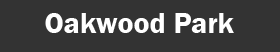
<style>
.page{position:relative;width:280px;height:52px;background:#333333}
.page>*{position:absolute;margin:0}
.t1{font:30px "FranklinGothic-Demi";color:#ffffff}
</style>
<div class="page">
<p class="t1" style="left:45px;top:13px;width:189px;height:20px">Oakwood Park</p>
</div>
